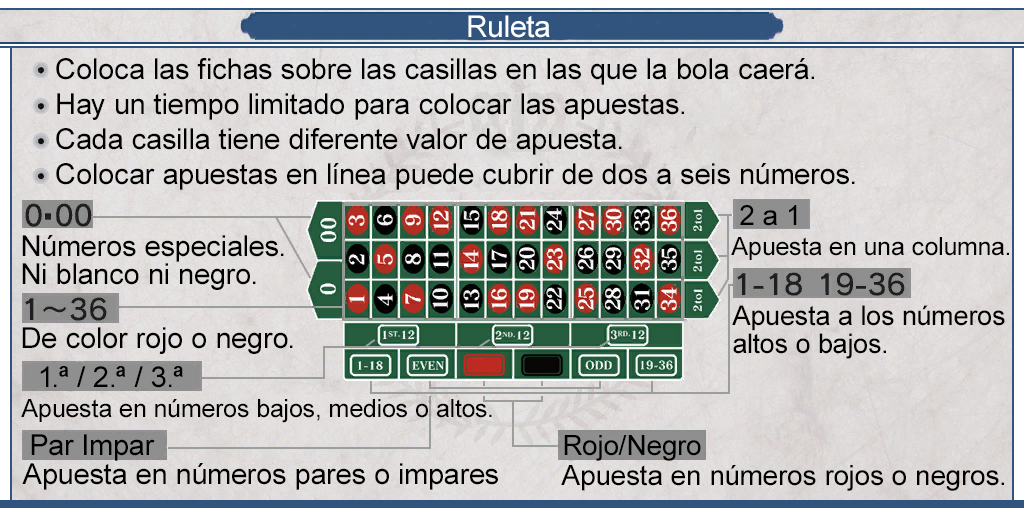
<style>
.page{position:relative;width:1024px;height:512px}
.page>*{position:absolute;margin:0}
.t1{font:30px "ArialMT";color:#fefefe}
.t2{font:29px/35px "ArialMT";color:#000000}
.t3{font:28px "ArialMT";color:#000000}
.t4{font:29px/28px "ArialMT";color:#000000}
.t5{font:25px "ArialMT";color:#000000}
.t6{font:27px/28px "ArialMT";color:#000000}
.t7{font:29px "ArialMT";color:#000000}
</style>
<div class="page">
<p class="t1" style="left:468px;top:15px;width:82px;height:23px">Ruleta</p>
<p class="t2" style="left:56px;top:58px;width:799px;height:132px">Coloca las fichas sobre las casillas en las que la bola caerá.<br>Hay un tiempo limitado para colocar las apuestas.<br>Cada casilla tiene diferente valor de apuesta.<br>Colocar apuestas en línea puede cubrir de dos a seis números.</p>
<p class="t3" style="left:740px;top:205px;width:57px;height:21px">2 a 1</p>
<p class="t4" style="left:22px;top:235px;width:262px;height:55px">Números especiales.<br>Ni blanco ni negro.</p>
<p class="t5" style="left:731px;top:237px;width:278px;height:23px">Apuesta en una columna.</p>
<p class="t6" style="left:732px;top:305px;width:273px;height:54px">Apuesta a los números <br>altos o bajos.</p>
<p class="t7" style="left:22px;top:327px;width:271px;height:27px">De color rojo o negro.</p>
<p class="t7" style="left:40px;top:366px;width:143px;height:22px">1.ª / 2.ª / 3.ª</p>
<p class="t5" style="left:21px;top:399px;width:471px;height:24px">Apuesta en números bajos, medios o altos.</p>
<p class="t7" style="left:31px;top:434px;width:124px;height:27px">Par Impar</p>
<p class="t3" style="left:564px;top:435px;width:137px;height:26px">Rojo/Negro</p>
<p class="t7" style="left:22px;top:463px;width:476px;height:27px">Apuesta en números pares o impares</p>
<p class="t3" style="left:561px;top:465px;width:443px;height:26px">Apuesta en números rojos o negros.</p>
</div>
